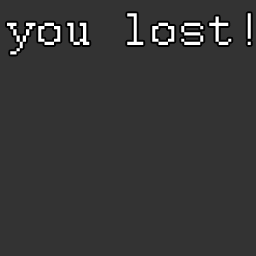
<style>
.page{position:relative;width:256px;height:256px;background:#333333}
.page>*{position:absolute;margin:0}
.t1{font:50.7px "Courier";color:#ffffff}
</style>
<div class="page">
<p class="t1" style="left:7px;top:13px;width:244px;height:42px">you lost!</p>
</div>
